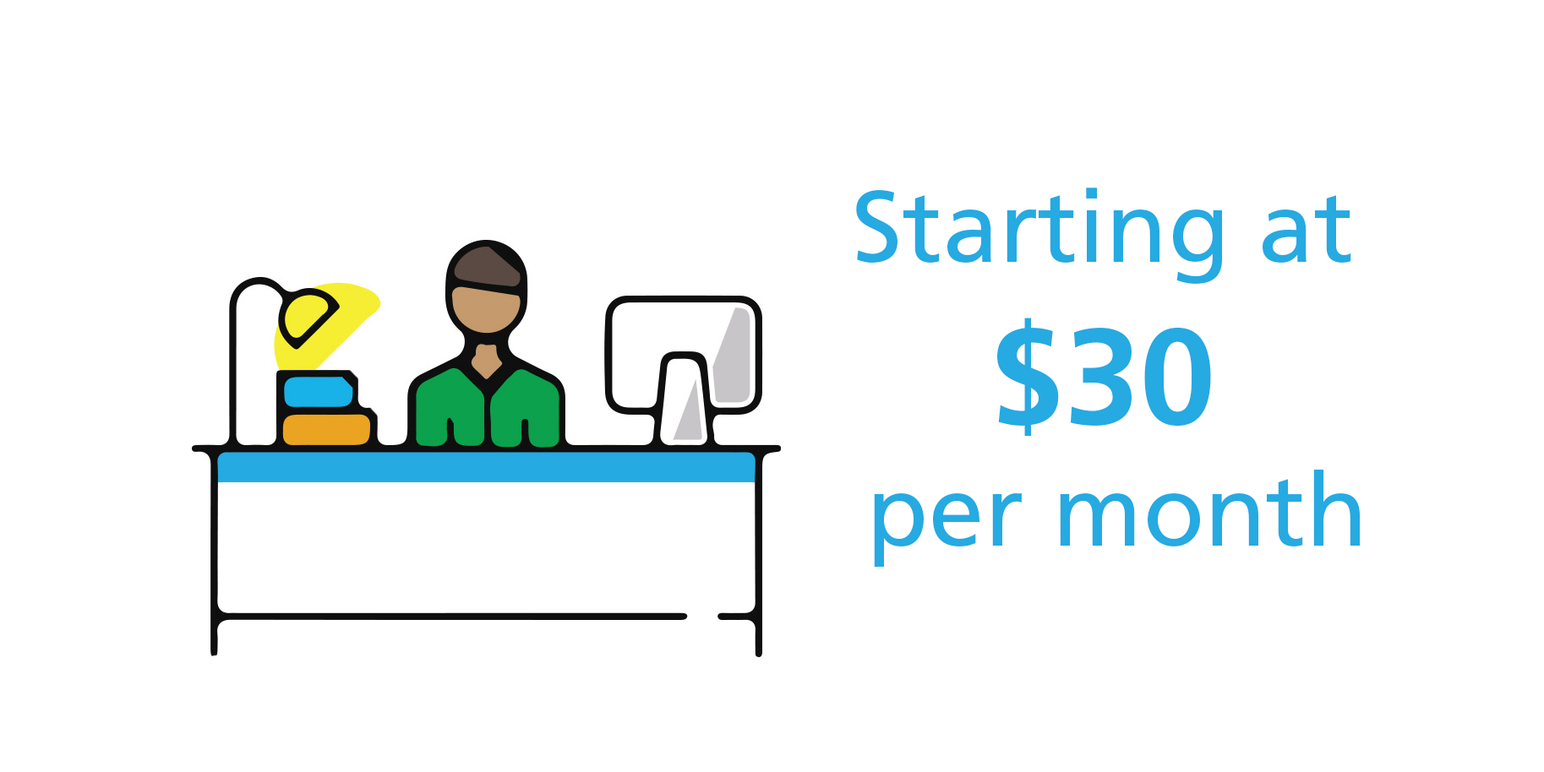
<style>
.page{position:relative;width:1544px;height:772px;background:#ffffff}
.page>*{position:absolute;margin:0}
.t1{font:101.4px "FrutigerLTStd-Roman";color:#25aae2}
.t2{font:135.2px "FrutigerLTStd-Bold";color:#25aae2}
</style>
<div class="page">
<p class="t1" style="left:856px;top:188px;width:504px;height:379px;text-align:center">Starting at <br><span class="t2">$30</span> <br>per month</p>
</div>
